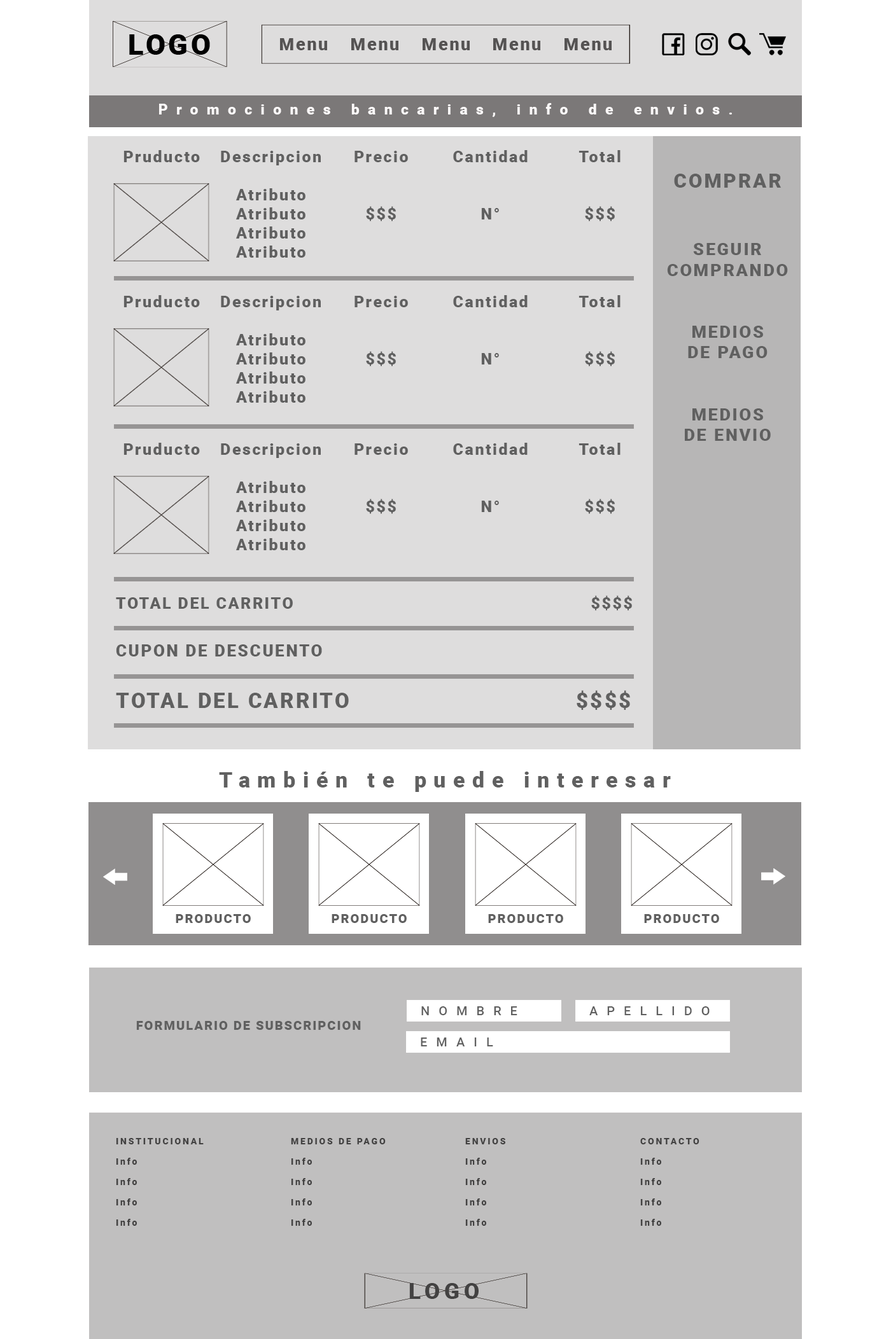
<style>
.page{position:relative;width:891px;height:1339px;background:#ffffff}
.page>*{position:absolute;margin:0}
.t1{font:14.6px "Roboto-Black";letter-spacing:0.58em;color:#fcf9f9}
.t2{font:15.9px "Roboto-Black";letter-spacing:0.1em;color:#606060}
.t3{font:17.2px "Roboto-Black";letter-spacing:0.1em;color:#606060}
.t4{font:19.7px "Roboto-Black";letter-spacing:0.1em;color:#606060}
.t5{font:16.5px "Roboto-Black";letter-spacing:0.1em;color:#606060}
.t6{font:20.9px "Roboto-Black";letter-spacing:0.1em;color:#606060}
.t7{font:21.6px "Roboto-Black";letter-spacing:0.34em;color:#606060}
.t8{font:12.7px "Roboto-Black";letter-spacing:0.1em;color:#606060}
.t9{font:12.7px "Roboto-Medium";letter-spacing:0.7em;color:#606060}
.t10{font:8.9px/20.4px "Roboto-Black";letter-spacing:0.2em;color:#434242}
</style>
<div class="page">
<p class="t1" style="left:159px;top:103px;width:573px;height:14px">Promociones bancarias, info de envios.</p>
<p class="t2" style="left:123px;top:150px;width:77px;height:12px">Pruducto</p>
<p class="t2" style="left:221px;top:151px;width:100px;height:107px;text-align:center">Descripcion<br><br>Atributo<br>Atributo<br>Atributo<br>Atributo</p>
<p class="t2" style="left:354px;top:151px;width:54px;height:70px;text-align:center">Precio<br><br><br>$$$</p>
<p class="t2" style="left:453px;top:150px;width:74px;height:69px;text-align:center">Cantidad<br><br><br>N°</p>
<p class="t2" style="left:578px;top:150px;width:42px;height:71px;text-align:center">Total<br><br><br>$$$</p>
<p class="t3" style="left:667px;top:174px;width:120px;height:267px;text-align:center"><span class="t4">COMPRAR<br><br><br></span>SEGUIR <br>COMPRANDO<br><br><br>MEDIOS <br>DE PAGO<br><br><br>MEDIOS<br>DE ENVIO</p>
<p class="t2" style="left:123px;top:295px;width:77px;height:12px">Pruducto</p>
<p class="t2" style="left:221px;top:296px;width:100px;height:107px;text-align:center">Descripcion<br><br>Atributo<br>Atributo<br>Atributo<br>Atributo</p>
<p class="t2" style="left:354px;top:296px;width:54px;height:70px;text-align:center">Precio<br><br><br>$$$</p>
<p class="t2" style="left:453px;top:295px;width:74px;height:69px;text-align:center">Cantidad<br><br><br>N°</p>
<p class="t2" style="left:578px;top:295px;width:42px;height:71px;text-align:center">Total<br><br><br>$$$</p>
<p class="t2" style="left:123px;top:443px;width:77px;height:12px">Pruducto</p>
<p class="t2" style="left:221px;top:443px;width:100px;height:107px;text-align:center">Descripcion<br><br>Atributo<br>Atributo<br>Atributo<br>Atributo</p>
<p class="t2" style="left:354px;top:443px;width:54px;height:71px;text-align:center">Precio<br><br><br>$$$</p>
<p class="t2" style="left:453px;top:443px;width:74px;height:69px;text-align:center">Cantidad<br><br><br>N°</p>
<p class="t2" style="left:578px;top:443px;width:42px;height:71px;text-align:center">Total<br><br><br>$$$</p>
<p class="t2" style="left:116px;top:597px;width:177px;height:12px">TOTAL DEL CARRITO</p>
<p class="t2" style="left:591px;top:595px;width:41px;height:16px">$$$$</p>
<p class="t5" style="left:116px;top:644px;width:206px;height:12px">CUPON DE DESCUENTO</p>
<p class="t6" style="left:116px;top:693px;width:233px;height:15px">TOTAL DEL CARRITO</p>
<p class="t6" style="left:576px;top:690px;width:54px;height:20px">$$$$</p>
<p class="t7" style="left:219px;top:771px;width:451px;height:21px">También te puede interesar</p>
<p class="t8" style="left:176px;top:914px;width:75px;height:9px">PRODUCTO</p>
<p class="t8" style="left:331px;top:914px;width:75px;height:9px">PRODUCTO</p>
<p class="t8" style="left:488px;top:914px;width:75px;height:9px">PRODUCTO</p>
<p class="t8" style="left:644px;top:914px;width:75px;height:9px">PRODUCTO</p>
<p class="t9" style="left:421px;top:1006px;width:96px;height:9px">NOMBRE</p>
<p class="t9" style="left:589px;top:1006px;width:120px;height:9px">APELLIDO</p>
<p class="t8" style="left:136px;top:1021px;width:225px;height:9px">FORMULARIO DE SUBSCRIPCION</p>
<p class="t9" style="left:420px;top:1037px;width:73px;height:9px">EMAIL</p>
<p class="t10" style="left:116px;top:1138px;width:88px;height:88px">INSTITUCIONAL<br>Info<br>Info<br>Info<br>Info</p>
<p class="t10" style="left:291px;top:1138px;width:94px;height:88px">MEDIOS DE PAGO<br>Info<br>Info<br>Info<br>Info</p>
<p class="t10" style="left:465px;top:1138px;width:40px;height:88px">ENVIOS<br>Info<br>Info<br>Info<br>Info</p>
<p class="t10" style="left:640px;top:1138px;width:59px;height:88px">CONTACTO<br>Info<br>Info<br>Info<br>Info</p>
</div>
